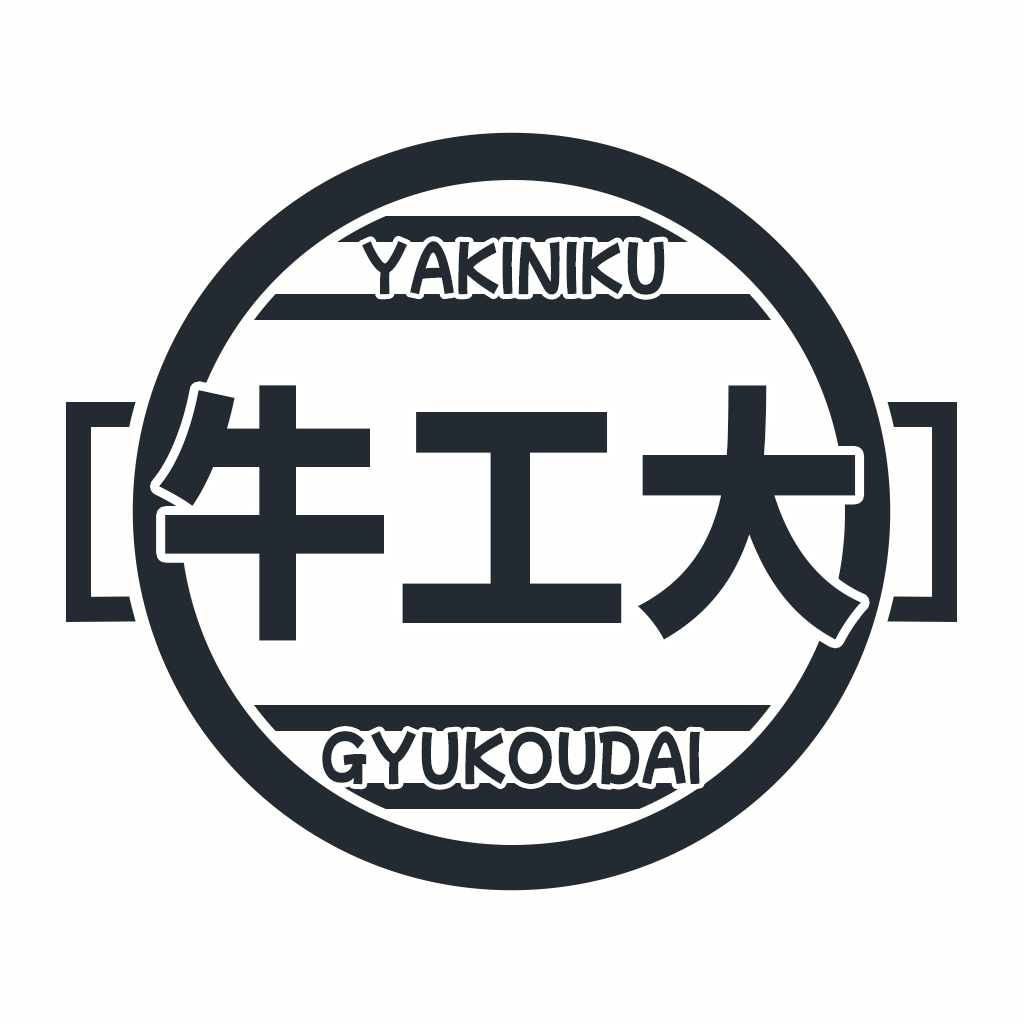
<style>
.page{position:relative;width:1024px;height:1024px;background:#fefefc}
.page>*{position:absolute;margin:0}
.t1{font:60px "MochiyPopOne-OTF-ExtraBold";color:#242a31;scale:0.88 1}
.t2{font:268.7px "MochiyPopOne-OTF-ExtraBold";color:#242a31;scale:0.88 1}
</style>
<div class="page">
<p class="t1" style="left:362px;top:240px;width:303px;height:55px">YAKINIKU</p>
<p class="t2" style="left:158px;top:385px;width:703px;height:256px">牛工大</p>
<p class="t1" style="left:322px;top:730px;width:378px;height:55px">GYUKOUDAI</p>
</div>
